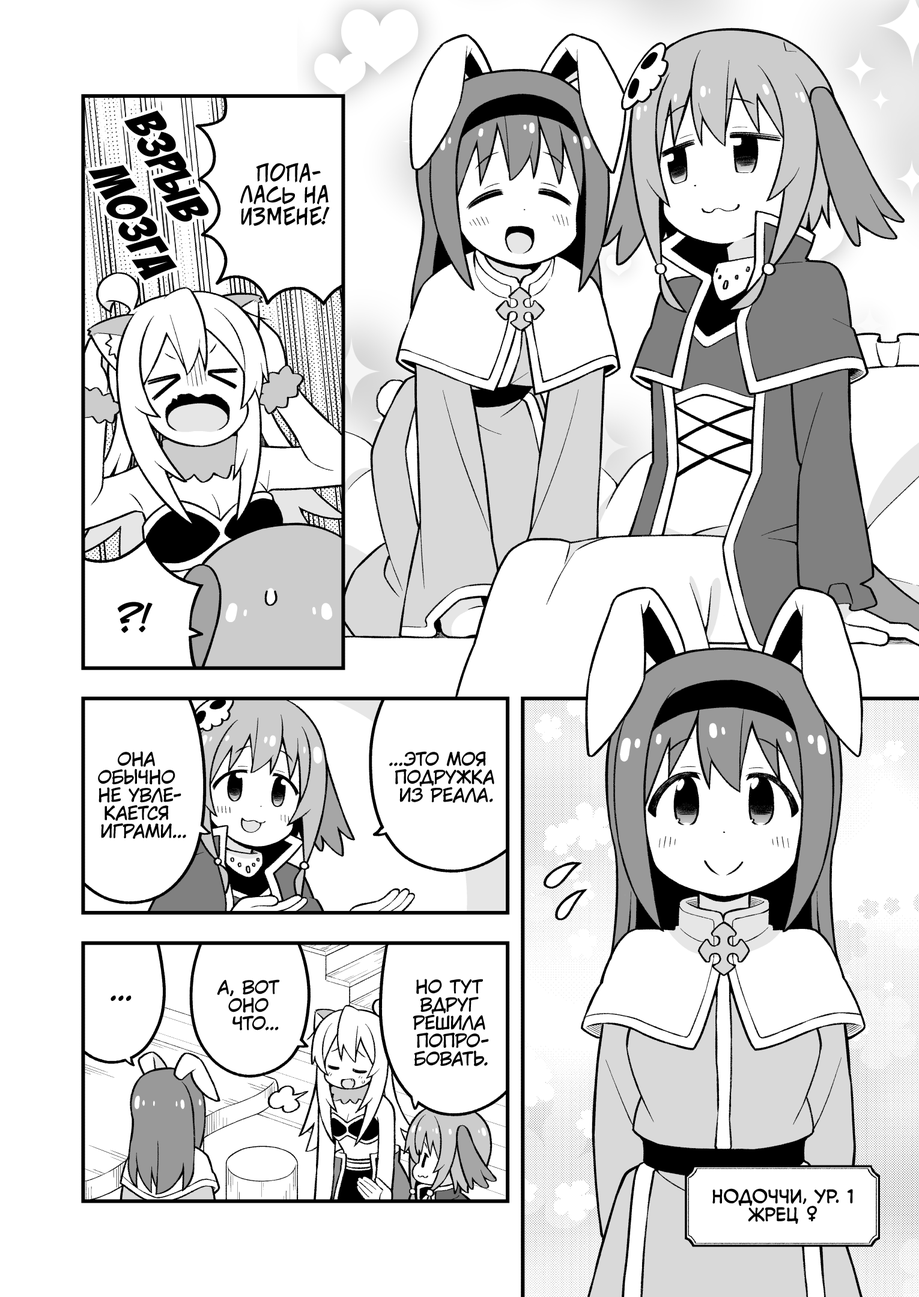
<style>
.page{position:relative;width:919px;height:1297px;background:#ffffff}
.page>*{position:absolute;margin:0}
.t1{font:54.1px "BadaBoom";color:#000000}
.t2{font:21.6px "v_CCJeffCampbell";color:#000000;text-transform:uppercase}
.t3{font:36px "v_CCJeffCampbell";color:#000000;text-transform:uppercase}
.t4{font:18px "KuraiVoice2";color:#000000;text-transform:uppercase}
.t5{font:28.8px "KuraiVoice2";color:#000000;text-transform:uppercase}
.t6{font:18px "v_CCMonologous";color:#000000;text-transform:uppercase}
</style>
<div class="page">
<p class="t1" style="left:88px;top:111px;width:121px;height:170px;text-align:center;rotate:64deg">взрыв<br>мозга</p>
<p class="t2" style="left:240px;top:163px;width:90px;height:63px;text-align:center">Попа-<br>лась на<br>измене!</p>
<p class="t3" style="left:117px;top:602px;width:36px;height:31px">?!</p>
<p class="t4" style="left:98px;top:751px;width:88px;height:88px;text-align:center">Она<br>обычно<br>не увле-<br>кается<br>играми...</p>
<p class="t4" style="left:389px;top:751px;width:105px;height:52px;text-align:center">...Это моя<br>подружка<br>из реала.</p>
<p class="t4" style="left:217px;top:980px;width:63px;height:51px;text-align:center">А, вот<br>оно<br>что...</p>
<p class="t4" style="left:413px;top:979px;width:76px;height:88px;text-align:center">Но тут<br>вдруг<br>решила<br>попро-<br>бовать.</p>
<p class="t5" style="left:111px;top:996px;width:21px;height:5px">...</p>
<p class="t6" style="left:712px;top:1189px;width:141px;height:36px;text-align:center">Нодоччи, ур. 1<br>жрец <span class="t4">♀</span></p>
</div>
